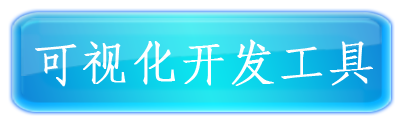
<style>
.page{position:relative;width:404px;height:123px}
.page>*{position:absolute;margin:0}
.t1{font:48px "STFangsong";color:#ffffff;font-weight:bold}
</style>
<div class="page">
<p class="t1" style="left:35px;top:39px;width:338px;height:48px">可视化开发工具</p>
</div>
